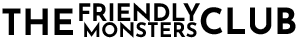
<style>
.page{position:relative;width:300px;height:40px;background:#ffffff}
.page>*{position:absolute;margin:0}
.t1{font:24px "JosefinSans-Bold";color:#000000}
.t2{font:36px "JosefinSans-Bold";color:#000000}
.t3{font:20px "JosefinSans-Bold";color:#000000}
</style>
<div class="page">
<p class="t1" style="left:79px;top:2px;width:121px;height:20px">FRIENDLY</p>
<p class="t2" style="left:2px;top:8px;width:71px;height:27px">THE</p>
<p class="t2" style="left:200px;top:7px;width:96px;height:28px">CLUB</p>
<p class="t3" style="left:84px;top:21px;width:113px;height:17px">MONSTERS</p>
</div>
